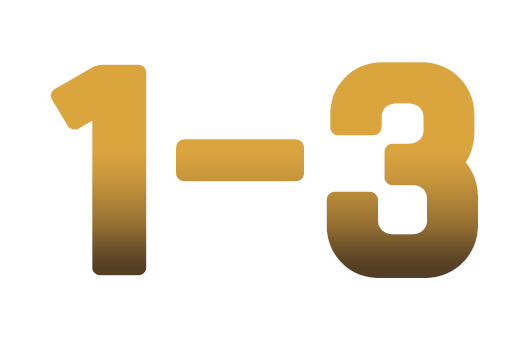
<style>
.page{position:relative;width:527px;height:338px;background:#ffffff}
.page>*{position:absolute;margin:0}
.t1{font:252.2px "TTTogether"}
</style>
<div class="page">
<p class="t1" style="left:50px;top:62px;width:428px;height:216px">1-3</p>
</div>
